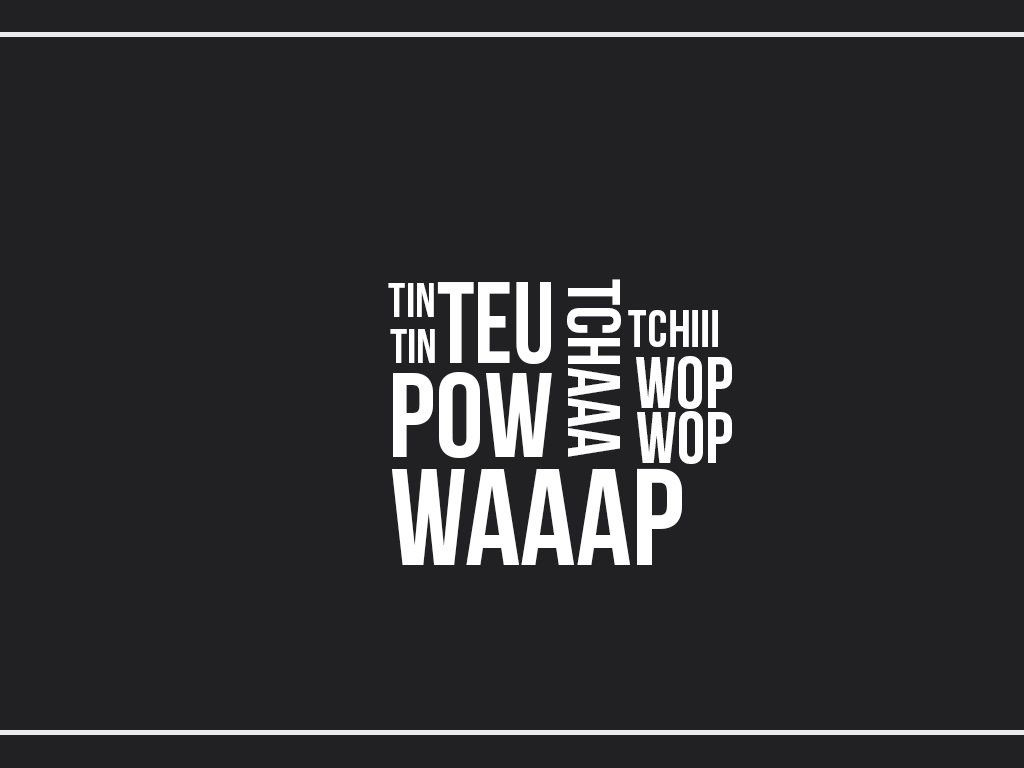
<style>
.page{position:relative;width:1024px;height:768px;background:#212123}
.page>*{position:absolute;margin:0}
.t1{font:74.9px "BebasNeue";color:#ffffff}
.t2{font:48px "BebasNeue";color:#ffffff}
.t3{font:116.1px "BebasNeue";color:#ffffff;scale:0.9 1}
.t4{font:51.9px "BebasNeue";color:#ffffff}
.t5{font:72.5px "BebasNeue";color:#ffffff}
.t6{font:120.2px "BebasNeue";color:#ffffff}
.t7{font:136.5px "BebasNeue";color:#ffffff}
</style>
<div class="page">
<p class="t1" style="left:567px;top:279px;width:54px;height:178px;rotate:90deg">TCHAAA</p>
<p class="t2" style="left:388px;top:283px;width:46px;height:34px">TIN</p>
<p class="t3" style="left:437px;top:282px;width:114px;height:82px">TEU</p>
<p class="t4" style="left:628px;top:310px;width:90px;height:37px">TCHIII</p>
<p class="t2" style="left:390px;top:329px;width:45px;height:34px">TIN</p>
<p class="t5" style="left:636px;top:356px;width:96px;height:53px">wop</p>
<p class="t6" style="left:393px;top:372px;width:159px;height:86px">POW</p>
<p class="t5" style="left:637px;top:411px;width:95px;height:53px">wop</p>
<p class="t7" style="left:392px;top:468px;width:290px;height:97px">WAAAP</p>
</div>
